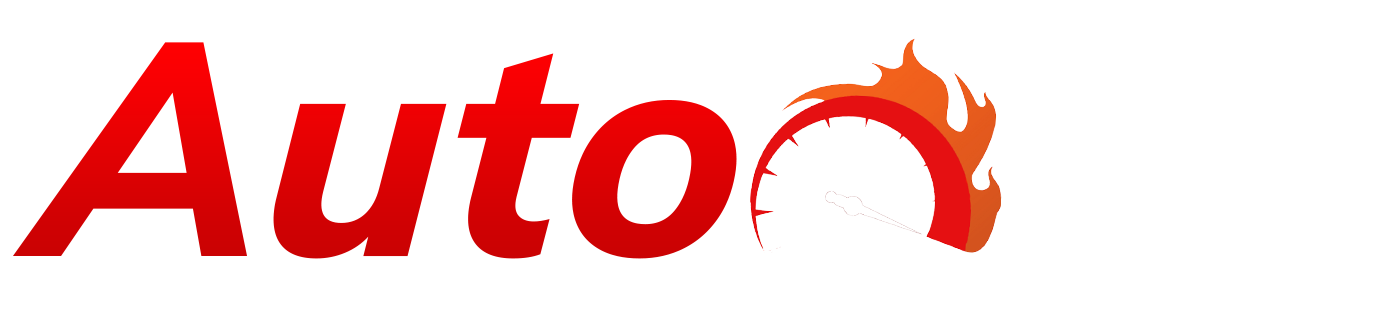
<style>
.page{position:relative;width:1396px;height:309px;background:#ffffff}
.page>*{position:absolute;margin:0}
.t1{font:300px "Muli-ExtraBoldItalic";color:#e51012;font-style:italic}
</style>
<div class="page">
<p class="t1" style="left:13px;top:42px;width:724px;height:217px">Auto</p>
</div>
